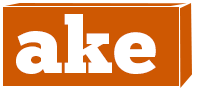
<style>
.page{position:relative;width:197px;height:88px;background:#ce5802}
.page>*{position:absolute;margin:0}
.t1{font:79.3px "ChunkFive-Regular";color:#ffffff}
</style>
<div class="page">
<p class="t1" style="left:16px;top:14px;width:140px;height:60px">ake</p>
</div>
